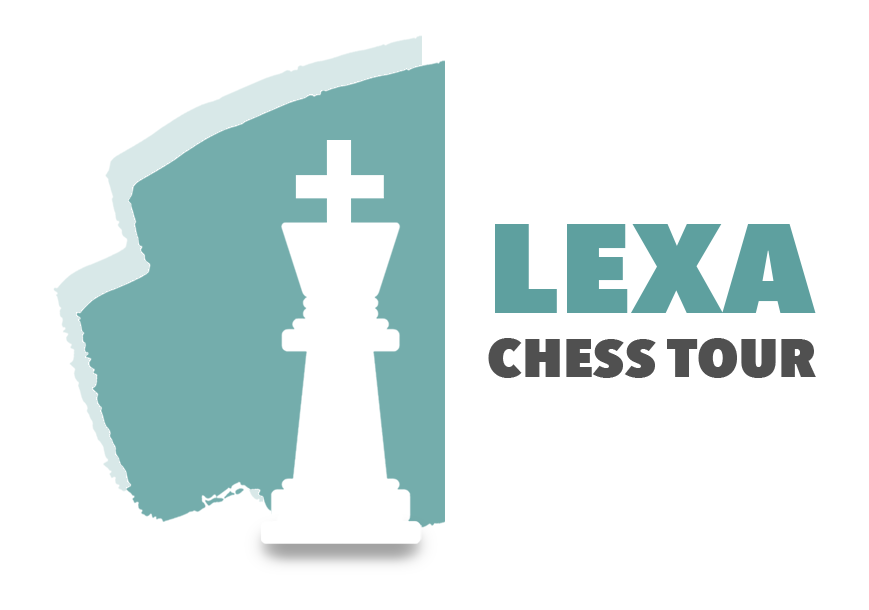
<style>
.page{position:relative;width:869px;height:610px;background:#ffffff}
.page>*{position:absolute;margin:0}
.t1{font:52.9px "AvenirNextCondensed-Heavy";color:#383838;scale:1.23 1}
.t2{font:125px "AvenirNextCondensed-Heavy";color:#489392;scale:1.23 1}
</style>
<div class="page">
<p class="t1" style="left:488px;top:224px;width:328px;height:154px;opacity:0.88"><span class="t2">LEXA<br></span>CHESS TOUR</p>
</div>
